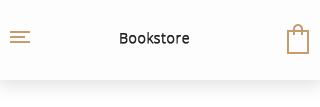
<style>
.page{position:relative;width:320px;height:107px;background:#fdfdfd}
.page>*{position:absolute;margin:0}
.t1{font:14px "OpenSans-Light";letter-spacing:0.05em;color:#212121;font-weight:bold}
</style>
<div class="page">
<p class="t1" style="left:120px;top:32px;width:69px;height:12px">Bookstore</p>
</div>
